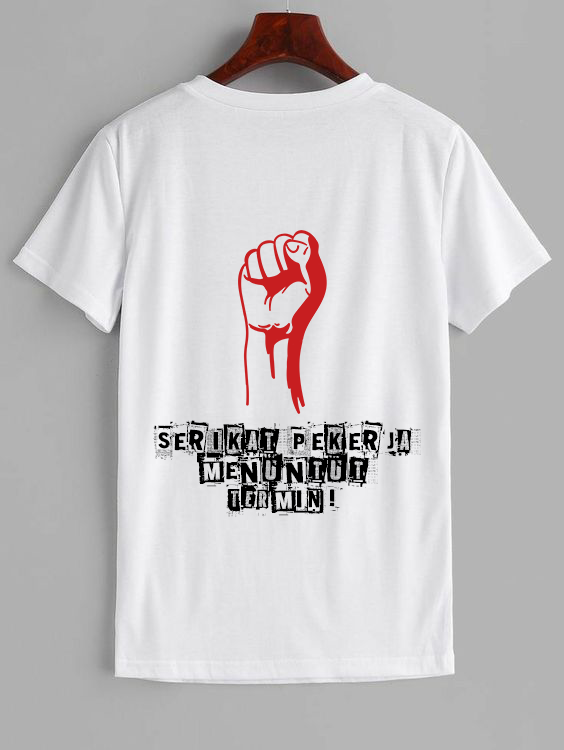
<style>
.page{position:relative;width:564px;height:750px}
.page>*{position:absolute;margin:0}
.t1{font:24px "Mustasurma";color:#000000}
</style>
<div class="page">
<p class="t1" style="left:153px;top:420px;width:268px;height:97px;text-align:center">Serikat Pekerja Menuntut TERMIN!</p>
</div>
